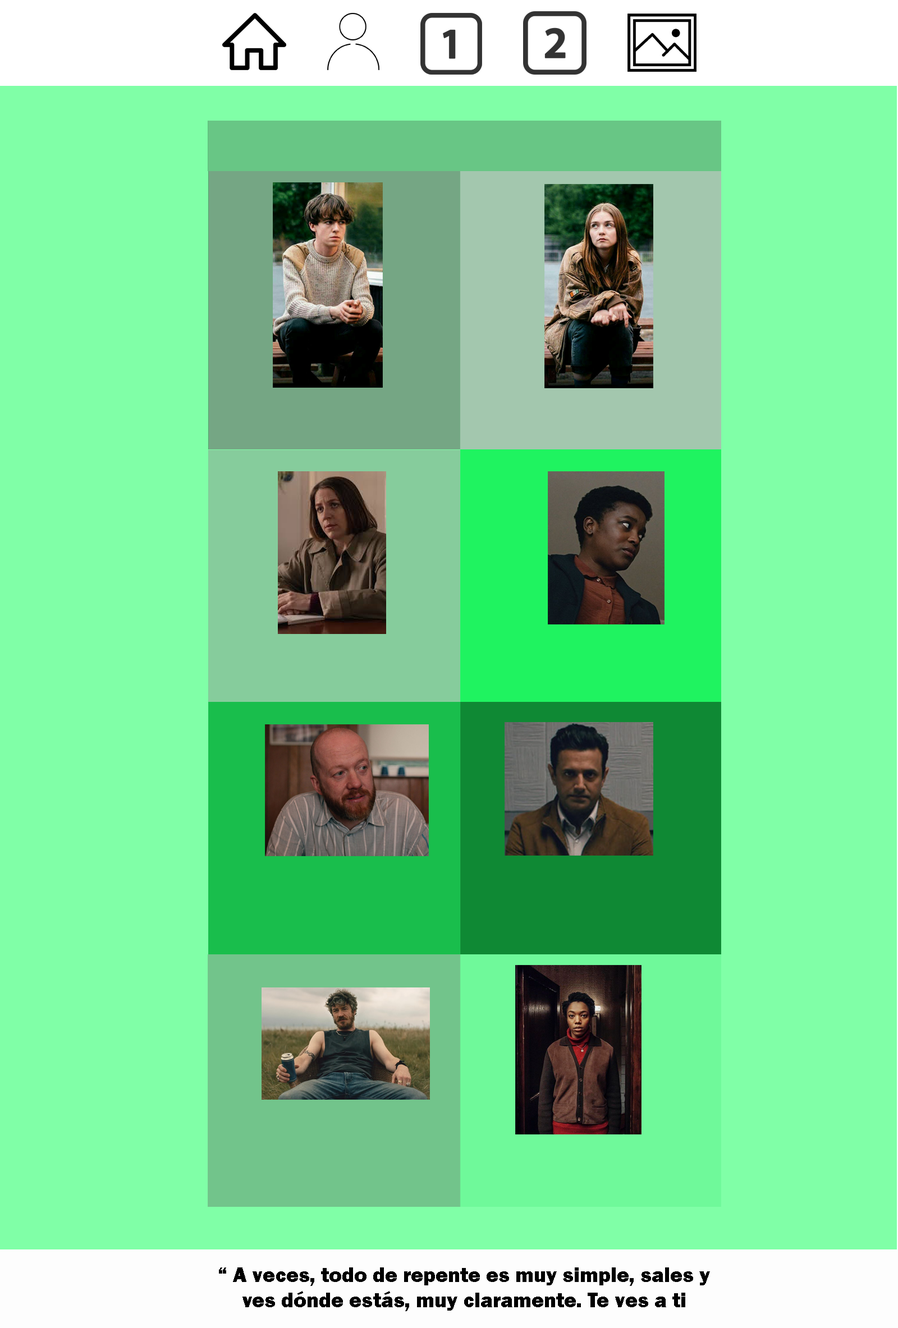
<style>
.page{position:relative;width:898px;height:1328px;background:#80ffa7}
.page>*{position:absolute;margin:0}
.t1{font:21px "FranklinGothic-Heavy";color:#000000}
</style>
<div class="page">
<p class="t1" style="left:219px;top:1268px;width:491px;height:43px;text-align:center">“ A veces, todo de repente es muy simple, sales y ves dónde estás, muy claramente. Te ves a ti mismo y piensas: ‘Que le den a esta mierda.”</p>
</div>
